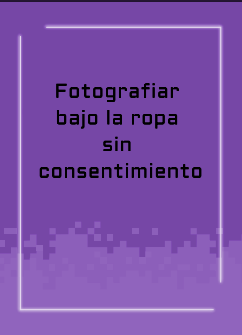
<style>
.page{position:relative;width:242px;height:335px;background:#7647a6}
.page>*{position:absolute;margin:0}
.t1{font:20px/26.7px "Aldrich-Regular";letter-spacing:0.025em;color:#000000}
</style>
<div class="page">
<p class="t1" style="left:39px;top:83px;width:163px;height:95px;text-align:center">Fotografiar <br>bajo la ropa <br>sin <br>consentimiento</p>
</div>
